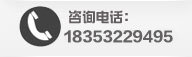
<style>
.page{position:relative;width:192px;height:57px;background:#f1f1f1}
.page>*{position:absolute;margin:0}
.t1{font:14px "FZLTTHK--GBK1-0";color:#646263}
</style>
<div class="page">
<p class="t1" style="left:64px;top:30px;width:109px;height:13px">18353229495</p>
</div>
